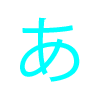
<style>
.page{position:relative;width:100px;height:100px;background:#ffffff}
.page>*{position:absolute;margin:0}
.t1{font:72px "KozGoPr6N-Regular";color:#00ffff}
</style>
<div class="page">
<p class="t1" style="left:20px;top:17px;width:60px;height:65px">あ</p>
</div>
